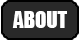
<style>
.page{position:relative;width:80px;height:40px;background:#292929}
.page>*{position:absolute;margin:0}
.t1{font:22.3px "Impact";color:#ffffff;scale:0.93 1}
</style>
<div class="page">
<p class="t1" style="left:12px;top:11px;width:55px;height:17px">ABOUT</p>
</div>
